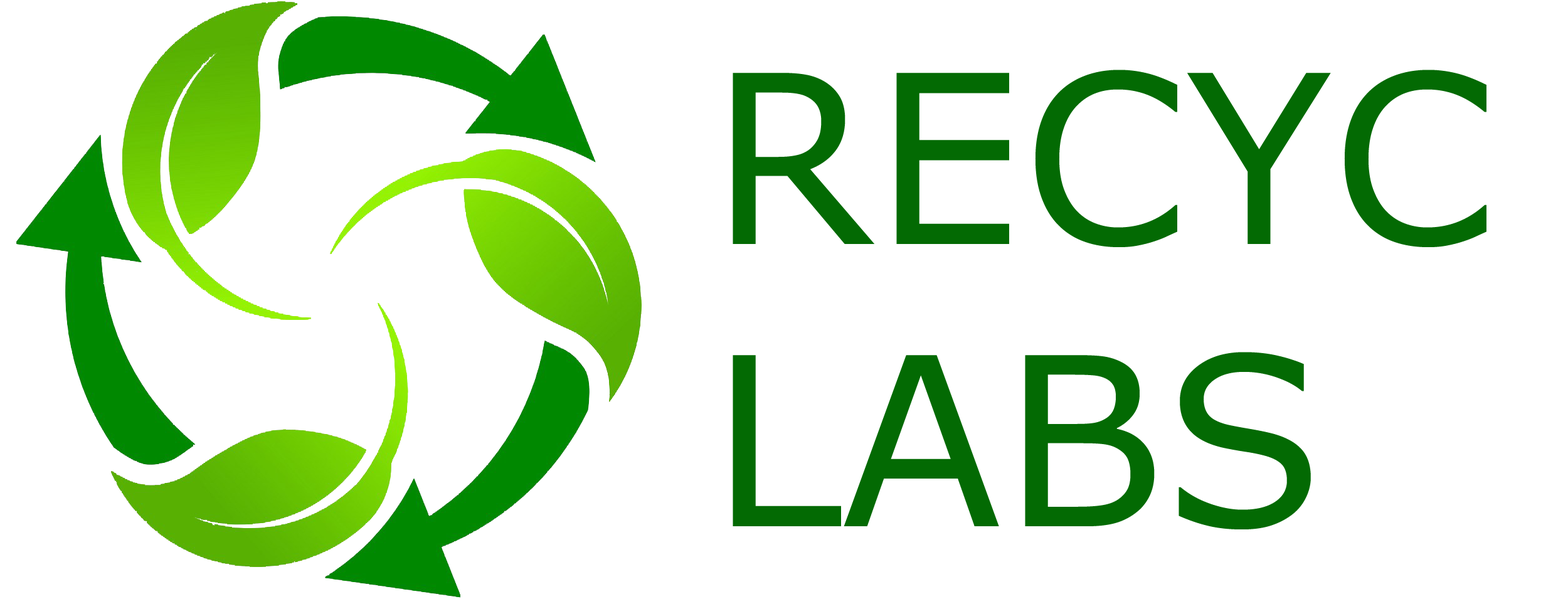
<style>
.page{position:relative;width:1568px;height:599px;background:#ffffff}
.page>*{position:absolute;margin:0}
.t1{font:235.2px "MSReferenceSansSerif";color:#036a03}
</style>
<div class="page">
<p class="t1" style="left:733px;top:70px;width:753px;height:459px">RECYC<br>LABS</p>
</div>
